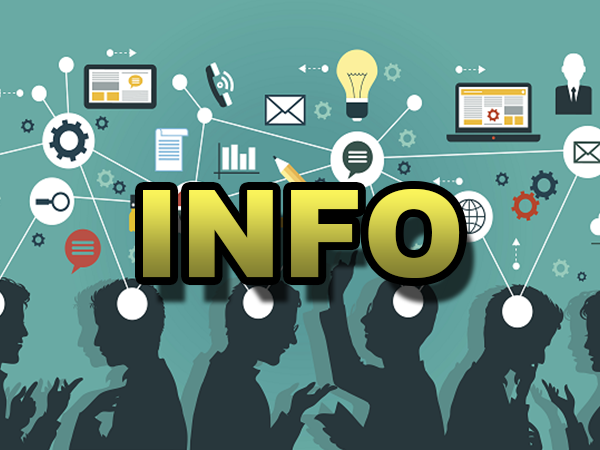
<style>
.page{position:relative;width:600px;height:450px}
.page>*{position:absolute;margin:0}
.t1{font:122px "Arial-Black"}
</style>
<div class="page">
<p class="t1" style="left:143px;top:189px;width:317px;height:89px">INFO</p>
</div>
